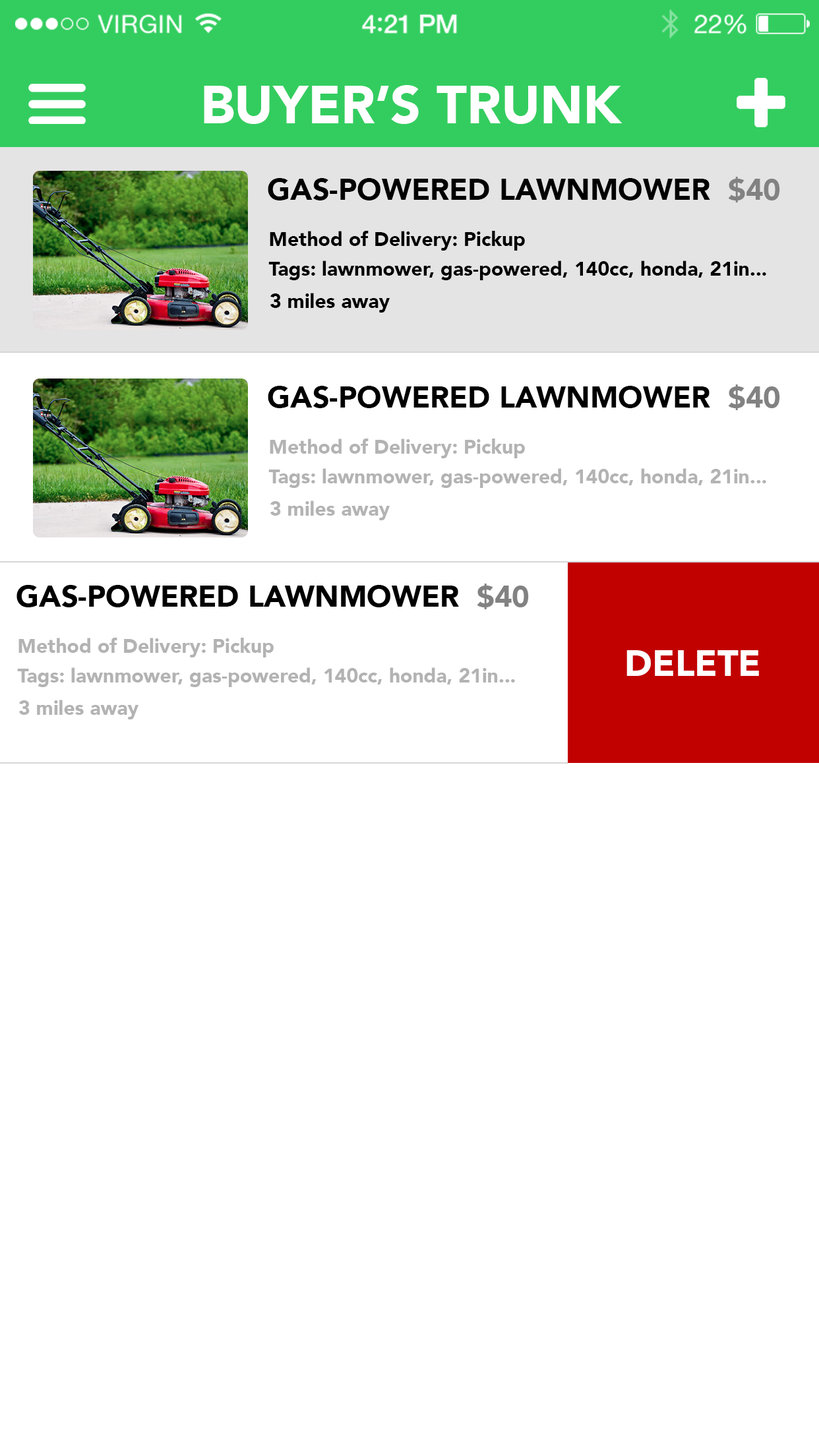
<style>
.page{position:relative;width:819px;height:1456px;background:#ffffff}
.page>*{position:absolute;margin:0}
.t1{font:52.8px "Avenir-Black";color:#ffffff}
.t2{font:29.7px "Avenir-Black";color:#000000}
.t3{font:29.7px "Avenir-Black";color:#828282}
.t4{font:19.8px "Avenir-Black";color:#000000}
.t5{font:19.8px "Avenir-Black";color:#b3b3b3}
.t6{font:36.3px "Avenir-Black";color:#ffffff}
</style>
<div class="page">
<p class="t1" style="left:204px;top:85px;width:418px;height:39px">BUYER’S TRUNK</p>
<p class="t2" style="left:268px;top:177px;width:512px;height:25px">GAS-POWERED LAWNMOWER  <span class="t3">$40</span></p>
<p class="t4" style="left:270px;top:231px;width:255px;height:20px">Method of Delivery: Pickup</p>
<p class="t4" style="left:268px;top:260px;width:498px;height:20px">Tags: lawnmower, gas-powered, 140cc, honda, 21in...</p>
<p class="t4" style="left:270px;top:293px;width:120px;height:20px">3 miles away</p>
<p class="t2" style="left:268px;top:384px;width:512px;height:26px">GAS-POWERED LAWNMOWER  <span class="t3">$40</span></p>
<p class="t5" style="left:270px;top:439px;width:255px;height:19px">Method of Delivery: Pickup</p>
<p class="t5" style="left:268px;top:468px;width:498px;height:20px">Tags: lawnmower, gas-powered, 140cc, honda, 21in...</p>
<p class="t5" style="left:270px;top:500px;width:120px;height:20px">3 miles away</p>
<p class="t6" style="left:626px;top:650px;width:133px;height:26px">DELETE</p>
</div>
